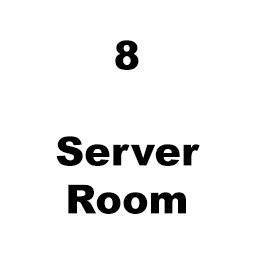
<style>
.page{position:relative;width:254px;height:254px;background:#ffffff}
.page>*{position:absolute;margin:0}
.t1{font:40px "Arial-Black";color:#000000}
</style>
<div class="page">
<p class="t1" style="left:56px;top:40px;width:144px;height:174px;text-align:center">8<br><br>Server<br>Room</p>
</div>
